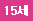
<style>
.page{position:relative;width:33px;height:21px;background:#da3888}
.page>*{position:absolute;margin:0}
.t1{font:12px "Dotum";color:#ffffff;font-weight:bold}
</style>
<div class="page">
<p class="t1" style="left:5px;top:5px;width:23px;height:11px">15세</p>
</div>
